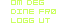
<style>
.page{position:relative;width:60px;height:23px;background:#ffffff}
.page>*{position:absolute;margin:0}
.t1{font:8px/9px "Orgv01";color:#ccff66}
</style>
<div class="page">
<p class="t1" style="left:11px;top:0px;width:45px;height:23px">OM DEG<br>DINE FRØ<br>LOGG UT</p>
</div>
